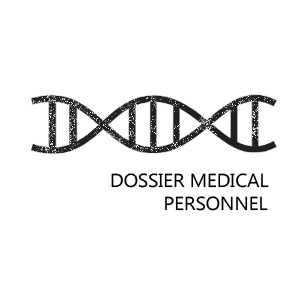
<style>
.page{position:relative;width:306px;height:306px;background:#ffffff}
.page>*{position:absolute;margin:0}
.t1{font:18.7px "MyanmarText";color:#000000}
</style>
<div class="page">
<p class="t1" style="left:111px;top:173px;width:158px;height:38px;text-align:center">DOSSIER MEDICAL<br>          PERSONNEL</p>
</div>
